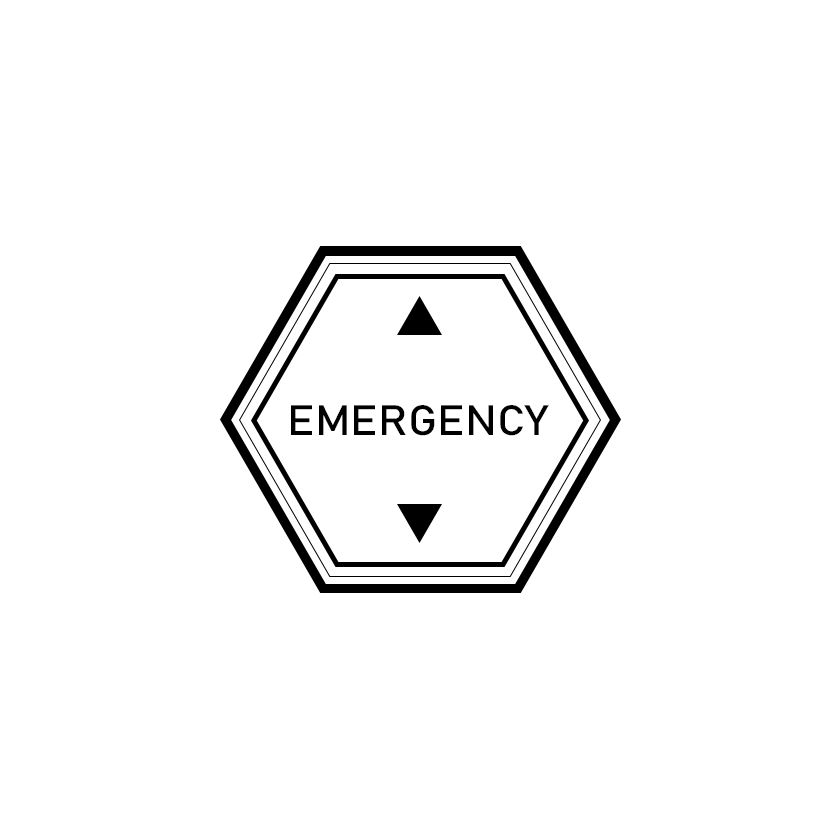
<style>
.page{position:relative;width:840px;height:840px;background:#ffffff}
.page>*{position:absolute;margin:0}
.t1{font:41.7px "Bahnschrift";color:#000000;scale:1.1 1}
</style>
<div class="page">
<p class="t1" style="left:291px;top:405px;width:258px;height:31px">EMERGENCY</p>
</div>
